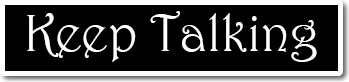
<style>
.page{position:relative;width:349px;height:82px;background:#000000}
.page>*{position:absolute;margin:0}
.t1{font:53px "Harrington";color:#ffffff}
</style>
<div class="page">
<p class="t1" style="left:27px;top:11px;width:290px;height:51px">Keep Talking</p>
</div>
